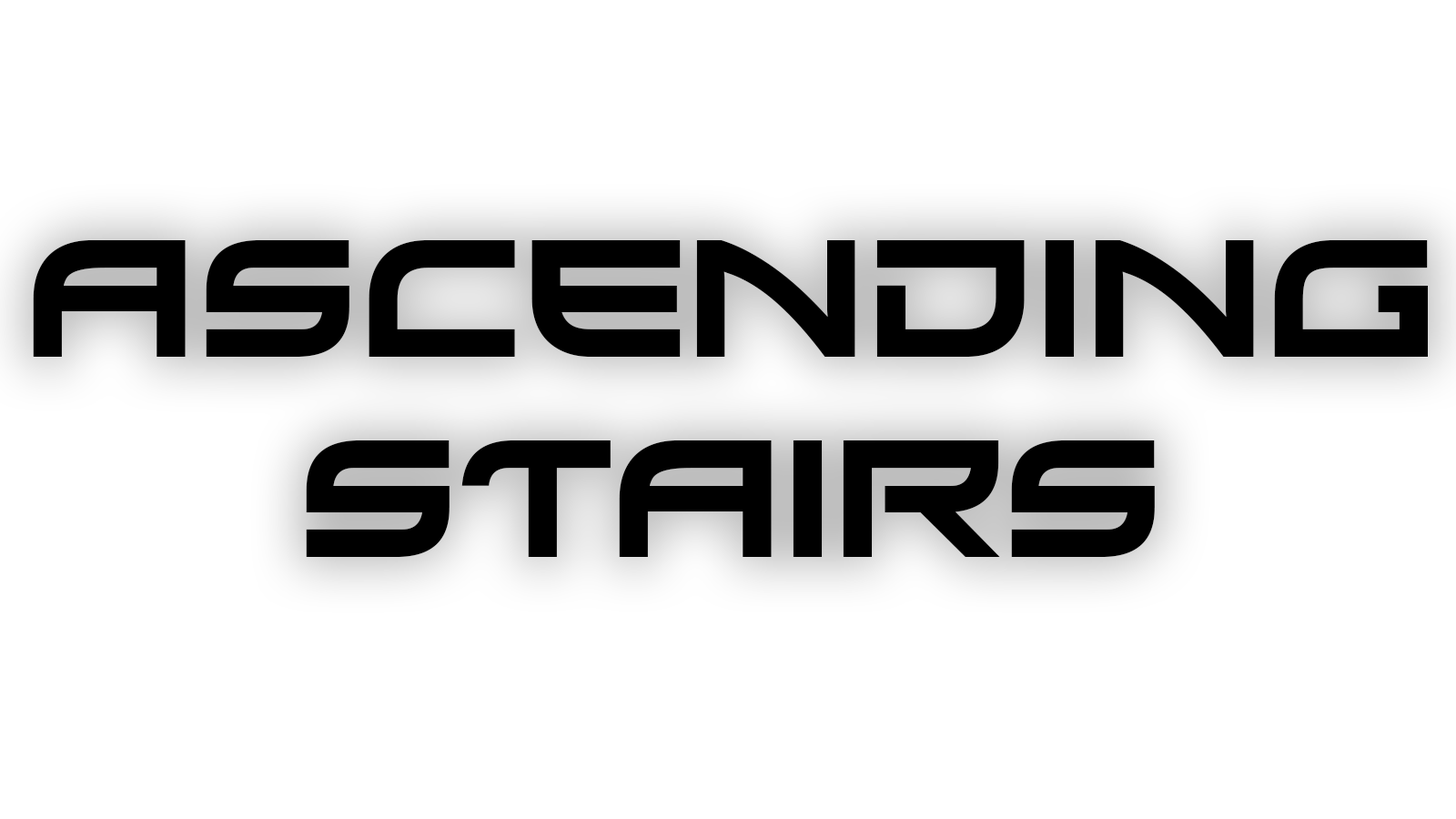
<style>
.page{position:relative;width:1456px;height:819px;background:#ffffff}
.page>*{position:absolute;margin:0}
.t1{font:166.8px "Xirod-Regular";color:#000000}
</style>
<div class="page">
<p class="t1" style="left:33px;top:240px;width:1395px;height:317px;text-align:center">Ascending<br>Stairs</p>
</div>
